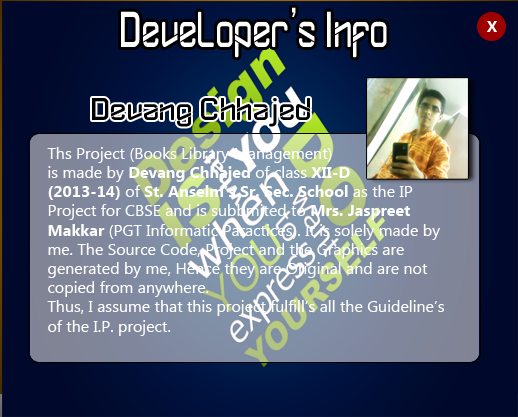
<style>
.page{position:relative;width:518px;height:417px}
.page>*{position:absolute;margin:0}
.t1{font:50.2px "DYLOVASTUFF";color:#ffffff;scale:0.75 1}
.t2{font:16px "MicrosoftNewTaiLue-Bold";color:#fffefe}
.t3{font:31.5px "DYLOVASTUFF";color:#000000;scale:1.06 1}
.t4{font:16px "MicrosoftNewTaiLue";color:#fffefe}
</style>
<div class="page">
<p class="t1" style="left:121px;top:7px;width:266px;height:51px">Developer’s Info</p>
<p class="t2" style="left:486px;top:21px;width:11px;height:11px">X</p>
<p class="t3" style="left:92px;top:98px;width:218px;height:29px">Devang Chhajed</p>
<p class="t4" style="left:47px;top:147px;width:397px;height:189px">Ths Project (Books Library Management)<br>is made by <span class="t2">Devang Chhajed</span> of class <span class="t2">XII-D<br>(2013-14)</span> of <span class="t2">St. Anselm’s Sr. Sec. School</span> as the IP<br>Project for CBSE and is subbmited to <span class="t2">Mrs. Jaspreet Makkar </span>(PGT Informatic Paractices). It is solely made by me. The Source Code, Project and the Graphics are<br>generated by me, Hence they are Original and are not copied from anywhere.<br>Thus, I assume that this project fulfill’s all the Guideline’s of the I.P. project.</p>
</div>
